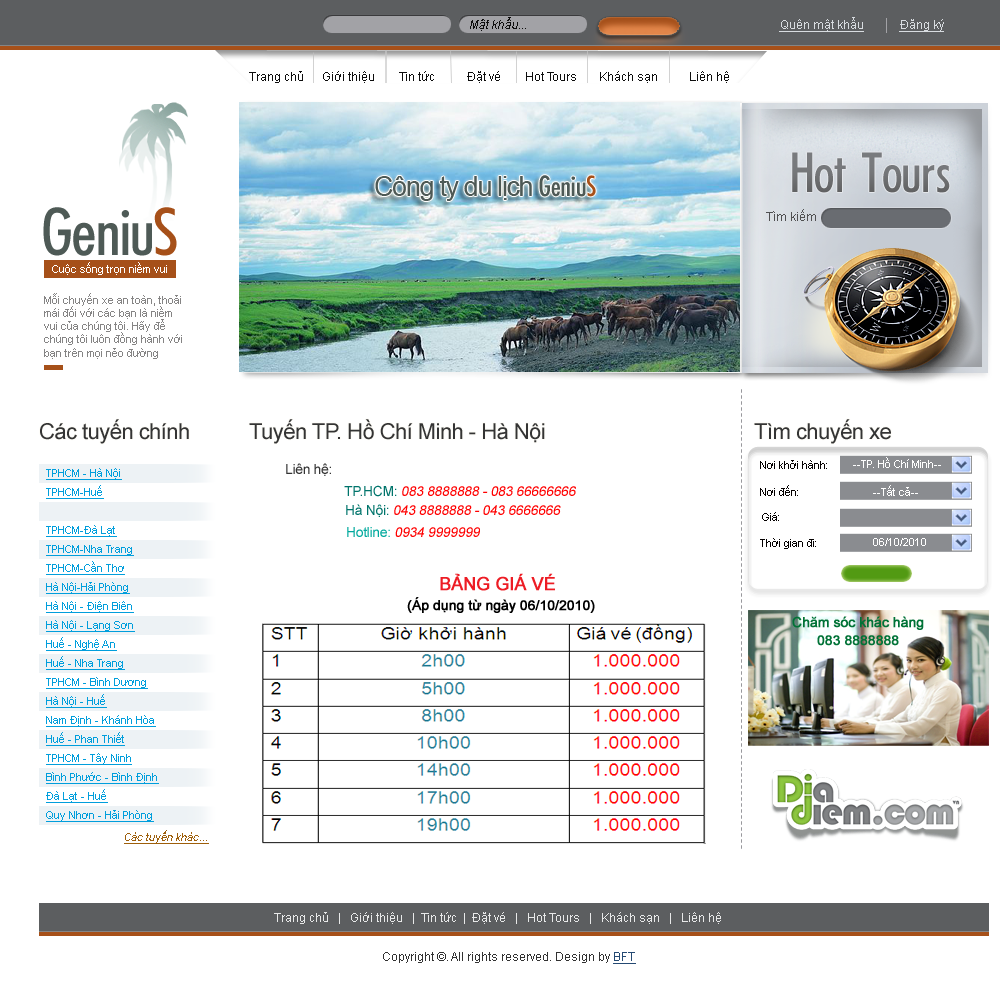
<style>
.page{position:relative;width:1000px;height:982px;background:#ffffff}
.page>*{position:absolute;margin:0}
.t1{font:12px "ArialMT";color:#0d0d0d;font-style:italic}
.t2{font:12px "ArialMT";color:#d8dce0;text-decoration:underline}
.t3{font:12px "ArialMT";color:#0d0d0d}
.t4{font:60px "FuturaCondensedPlain";color:#797b7e}
.t5{font:72px "FuturaCondensedPlain";color:#4e5a56}
.t6{font:72px "FuturaCondensedPlain";color:#a65019}
.t7{font:12px "ArialMT";color:#505051}
.t8{font:11px "ArialMT";color:#ffffff}
.t9{font:11px "ArialMT";color:#858484}
.t10{font:22px "ArialMT";letter-spacing:-0.025em;color:#343434}
.t11{font:11px "ArialMT";color:#040000}
.t12{font:11px "ArialMT";color:#009edc;text-decoration:underline}
.t13{font:14px "ArialMT";letter-spacing:-0.025em;color:#343434}
.t14{font:14px "ArialMT";letter-spacing:-0.025em;color:#ff0000;font-style:italic}
.t15{font:14px "ArialMT";letter-spacing:-0.025em;color:#00746b}
.t16{font:14px "ArialMT";letter-spacing:-0.025em;color:#00a99d}
.t17{font:18px "ArialMT";letter-spacing:-0.025em;color:#ed1c24;font-weight:bold}
.t18{font:14px "ArialMT";letter-spacing:-0.025em;color:#000000;font-weight:bold}
.t19{font:14px/18px "ArialMT";letter-spacing:-0.025em;color:#007236;font-weight:bold}
.t20{font:11px "ArialMT";color:#9e5f0b;font-style:italic;text-decoration:underline}
.t21{font:12px "ArialMT";color:#e8e9e9}
.t22{font:12px "ArialMT";color:#323232}
.t23{font:12px "ArialMT";color:#254a73;text-decoration:underline}
</style>
<div class="page">
<p class="t1" style="left:470px;top:17px;width:56px;height:14px">Mật khẩu...</p>
<p class="t2" style="left:779px;top:17px;width:85px;height:15px">Quên mật khẩu</p>
<p class="t2" style="left:899px;top:19px;width:45px;height:13px">Đăng ký</p>
<p class="t3" style="left:249px;top:71px;width:54px;height:12px">Trang chủ</p>
<p class="t3" style="left:323px;top:71px;width:51px;height:12px">Giới thiệu</p>
<p class="t3" style="left:399px;top:71px;width:35px;height:10px">Tin tức</p>
<p class="t3" style="left:467px;top:71px;width:33px;height:12px">Đặt vé</p>
<p class="t3" style="left:526px;top:72px;width:50px;height:9px">Hot Tours</p>
<p class="t3" style="left:600px;top:71px;width:57px;height:12px">Khách sạn</p>
<p class="t3" style="left:690px;top:71px;width:39px;height:12px">Liên hệ</p>
<p class="t4" style="left:792px;top:152px;width:158px;height:41px">Hot Tours</p>
<p class="t5" style="left:43px;top:207px;width:134px;height:49px">Geniu<span class="t6">S</span></p>
<p class="t7" style="left:766px;top:209px;width:50px;height:12px">Tìm kiếm</p>
<p class="t8" style="left:52px;top:262px;width:115px;height:13px">Cuộc sống trọn niềm vui</p>
<p class="t9" style="left:44px;top:293px;width:138px;height:66px">Mỗi chuyến xe an toàn, thoải mái đối với các bạn là niềm vui của chúng tôi. Hãy để chúng tôi luôn đồng hành với bạn trên mọi nẻo đường</p>
<p class="t10" style="left:40px;top:419px;width:149px;height:25px">Các tuyến chính</p>
<p class="t10" style="left:249px;top:419px;width:296px;height:25px">Tuyến TP. Hồ Chí Minh - Hà Nội</p>
<p class="t10" style="left:754px;top:419px;width:137px;height:25px">Tìm chuyến xe</p>
<p class="t11" style="left:760px;top:460px;width:67px;height:9px">Nơi khởi hành:</p>
<p class="t8" style="left:853px;top:457px;width:88px;height:11px">--TP. Hồ Chí Minh--</p>
<p class="t12" style="left:46px;top:468px;width:76px;height:12px">TPHCM - Hà Nội</p>
<p class="t13" style="left:286px;top:463px;width:45px;height:13px">Liên hệ:</p>
<p class="t12" style="left:46px;top:485px;width:58px;height:14px">TPHCM-Huế</p>
<p class="t14" style="left:344px;top:485px;width:232px;height:12px"><span class="t15">TP.HCM: </span>083 8888888 - 083 66666666</p>
<p class="t11" style="left:760px;top:485px;width:38px;height:11px">Nơi đến:</p>
<p class="t8" style="left:873px;top:485px;width:45px;height:11px">--Tất cả--</p>
<p class="t14" style="left:346px;top:504px;width:215px;height:13px"><span class="t15">Hà Nội: </span>043 8888888 - 043 6666666</p>
<p class="t11" style="left:762px;top:512px;width:17px;height:9px">Giá:</p>
<p class="t12" style="left:46px;top:525px;width:71px;height:12px">TPHCM-Đà Lạt</p>
<p class="t14" style="left:347px;top:527px;width:133px;height:10px"><span class="t16">Hotline:</span> 0934 9999999</p>
<p class="t12" style="left:46px;top:545px;width:88px;height:11px">TPHCM-Nha Trang</p>
<p class="t11" style="left:760px;top:538px;width:56px;height:11px">Thời gian đi:</p>
<p class="t8" style="left:873px;top:538px;width:53px;height:8px">06/10/2010</p>
<p class="t12" style="left:46px;top:561px;width:79px;height:14px">TPHCM-Cần Thơ</p>
<p class="t12" style="left:46px;top:582px;width:84px;height:12px">Hà Nội-Hải Phòng</p>
<p class="t17" style="left:440px;top:573px;width:115px;height:18px">BẢNG GIÁ VÉ</p>
<p class="t12" style="left:46px;top:601px;width:88px;height:12px">Hà Nội - Điện Biên</p>
<p class="t18" style="left:407px;top:597px;width:188px;height:16px">(Áp dụng từ ngày 06/10/2010)</p>
<p class="t19" style="left:792px;top:616px;width:132px;height:30px;text-align:center">Chăm sóc khác hàng<br>083 8888888</p>
<p class="t12" style="left:46px;top:620px;width:89px;height:12px">Hà Nội - Lạng Sơn</p>
<p class="t12" style="left:46px;top:637px;width:71px;height:14px">Huế - Nghệ An</p>
<p class="t12" style="left:46px;top:656px;width:79px;height:14px">Huế - Nha Trang</p>
<p class="t12" style="left:46px;top:677px;width:102px;height:12px">TPHCM - Bình Dương</p>
<p class="t12" style="left:46px;top:694px;width:61px;height:14px">Hà Nội - Huế</p>
<p class="t12" style="left:46px;top:715px;width:110px;height:12px">Nam Định - Khánh Hòa</p>
<p class="t12" style="left:46px;top:732px;width:79px;height:14px">Huế - Phan Thiết</p>
<p class="t12" style="left:46px;top:753px;width:86px;height:12px">TPHCM - Tây Ninh</p>
<p class="t12" style="left:46px;top:772px;width:113px;height:12px">Bình Phước - Bình Định</p>
<p class="t12" style="left:46px;top:789px;width:62px;height:14px">Đà Lạt - Huế</p>
<p class="t12" style="left:46px;top:810px;width:108px;height:12px">Quy Nhơn - Hải Phòng</p>
<p class="t20" style="left:124px;top:830px;width:85px;height:14px">Các tuyến khác...</p>
<p class="t21" style="left:274px;top:912px;width:447px;height:12px">Trang chủ   |   Giới thiệu   |  Tin tức  |  Đặt vé   |   Hot Tours   |   Khách sạn   |   Liên hệ</p>
<p class="t22" style="left:383px;top:952px;width:253px;height:12px">Copyright ©. All rights reserved. Design by <span class="t23">BFT</span></p>
</div>
